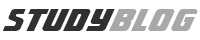
<style>
.page{position:relative;width:200px;height:40px;background:#ffffff}
.page>*{position:absolute;margin:0}
.t1{font:33.3px "SonicCutThruBT-Heavy";color:#313030}
.t2{font:33.3px "SonicCutThruBT-Heavy";color:#a8a8a8}
</style>
<div class="page">
<p class="t1" style="left:3px;top:9px;width:195px;height:22px">Study<span class="t2">Blog</span></p>
</div>
